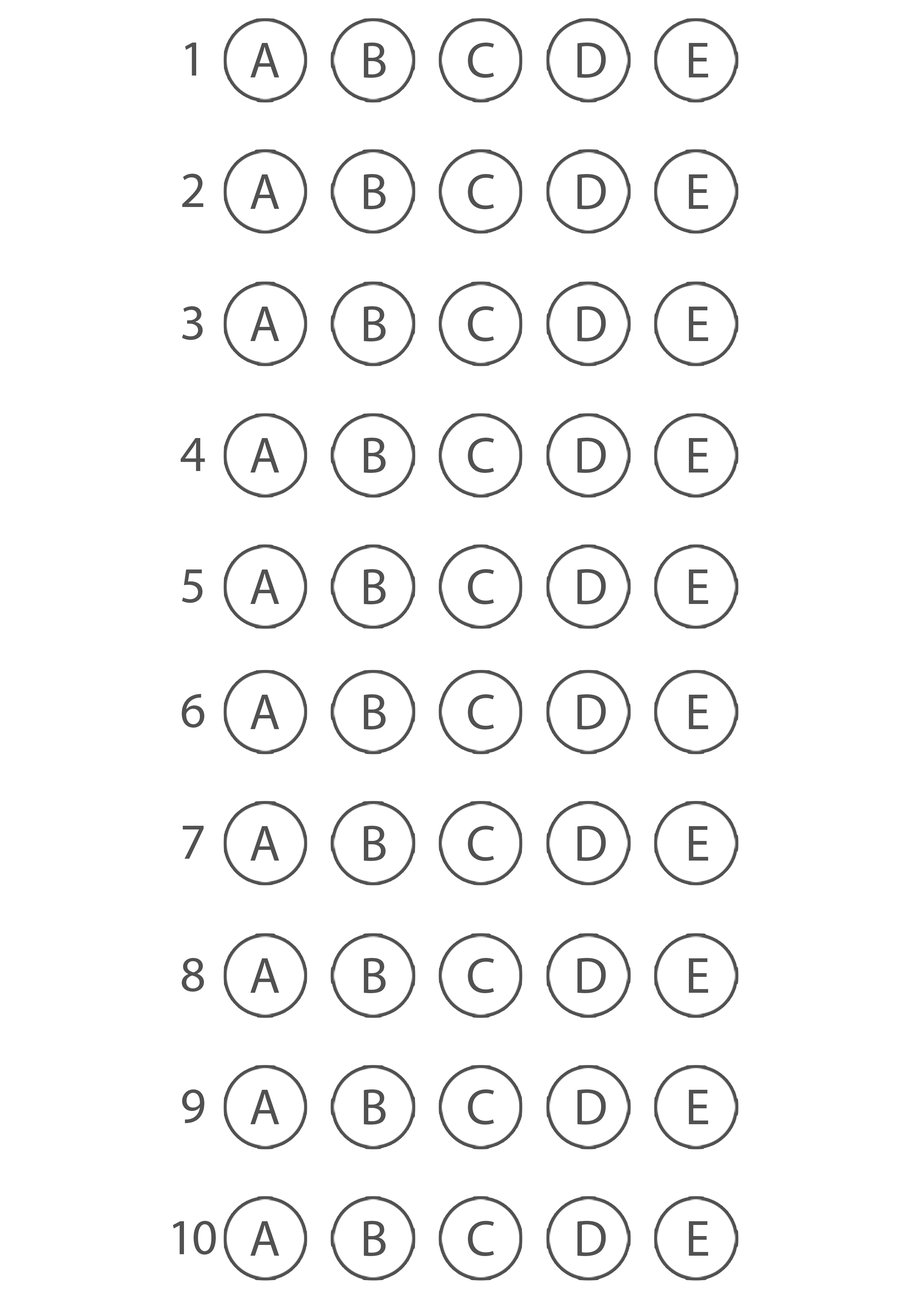
<style>
.page{position:relative;width:918px;height:1299px;background:#ffffff}
.page>*{position:absolute;margin:0}
.t1{font:50.8px "MyriadPro-Regular";letter-spacing:-0.04em;color:#515151}
</style>
<div class="page">
<p class="t1" style="left:185px;top:43px;width:11px;height:33px">1</p>
<p class="t1" style="left:250px;top:43px;width:29px;height:34px">A</p>
<p class="t1" style="left:364px;top:43px;width:22px;height:35px">B</p>
<p class="t1" style="left:468px;top:43px;width:26px;height:35px">C</p>
<p class="t1" style="left:578px;top:43px;width:28px;height:35px">D</p>
<p class="t1" style="left:689px;top:43px;width:20px;height:34px">E</p>
<p class="t1" style="left:182px;top:174px;width:22px;height:33px">2</p>
<p class="t1" style="left:250px;top:174px;width:29px;height:35px">A</p>
<p class="t1" style="left:364px;top:174px;width:22px;height:35px">B</p>
<p class="t1" style="left:468px;top:174px;width:26px;height:35px">C</p>
<p class="t1" style="left:578px;top:174px;width:28px;height:35px">D</p>
<p class="t1" style="left:689px;top:174px;width:20px;height:35px">E</p>
<p class="t1" style="left:182px;top:306px;width:21px;height:34px">3</p>
<p class="t1" style="left:250px;top:307px;width:29px;height:34px">A</p>
<p class="t1" style="left:364px;top:306px;width:22px;height:35px">B</p>
<p class="t1" style="left:468px;top:306px;width:26px;height:35px">C</p>
<p class="t1" style="left:578px;top:306px;width:28px;height:35px">D</p>
<p class="t1" style="left:689px;top:307px;width:20px;height:34px">E</p>
<p class="t1" style="left:181px;top:438px;width:24px;height:33px">4</p>
<p class="t1" style="left:250px;top:438px;width:29px;height:34px">A</p>
<p class="t1" style="left:364px;top:438px;width:22px;height:35px">B</p>
<p class="t1" style="left:468px;top:438px;width:26px;height:35px">C</p>
<p class="t1" style="left:578px;top:438px;width:28px;height:35px">D</p>
<p class="t1" style="left:689px;top:438px;width:20px;height:34px">E</p>
<p class="t1" style="left:182px;top:569px;width:21px;height:34px">5</p>
<p class="t1" style="left:250px;top:569px;width:29px;height:35px">A</p>
<p class="t1" style="left:364px;top:569px;width:22px;height:35px">B</p>
<p class="t1" style="left:468px;top:569px;width:26px;height:35px">C</p>
<p class="t1" style="left:578px;top:569px;width:28px;height:35px">D</p>
<p class="t1" style="left:689px;top:569px;width:20px;height:35px">E</p>
<p class="t1" style="left:182px;top:694px;width:22px;height:33px">6</p>
<p class="t1" style="left:250px;top:695px;width:29px;height:34px">A</p>
<p class="t1" style="left:364px;top:694px;width:22px;height:35px">B</p>
<p class="t1" style="left:468px;top:694px;width:26px;height:35px">C</p>
<p class="t1" style="left:578px;top:694px;width:28px;height:35px">D</p>
<p class="t1" style="left:689px;top:695px;width:20px;height:34px">E</p>
<p class="t1" style="left:183px;top:826px;width:21px;height:33px">7</p>
<p class="t1" style="left:250px;top:826px;width:29px;height:34px">A</p>
<p class="t1" style="left:364px;top:826px;width:22px;height:35px">B</p>
<p class="t1" style="left:468px;top:826px;width:26px;height:35px">C</p>
<p class="t1" style="left:578px;top:826px;width:28px;height:35px">D</p>
<p class="t1" style="left:689px;top:826px;width:20px;height:34px">E</p>
<p class="t1" style="left:182px;top:957px;width:22px;height:34px">8</p>
<p class="t1" style="left:250px;top:958px;width:29px;height:35px">A</p>
<p class="t1" style="left:364px;top:958px;width:22px;height:35px">B</p>
<p class="t1" style="left:468px;top:958px;width:26px;height:35px">C</p>
<p class="t1" style="left:578px;top:958px;width:28px;height:35px">D</p>
<p class="t1" style="left:689px;top:958px;width:20px;height:35px">E</p>
<p class="t1" style="left:182px;top:1089px;width:22px;height:34px">9</p>
<p class="t1" style="left:250px;top:1090px;width:29px;height:34px">A</p>
<p class="t1" style="left:364px;top:1089px;width:22px;height:35px">B</p>
<p class="t1" style="left:468px;top:1089px;width:26px;height:35px">C</p>
<p class="t1" style="left:578px;top:1089px;width:28px;height:35px">D</p>
<p class="t1" style="left:689px;top:1090px;width:20px;height:34px">E</p>
<p class="t1" style="left:173px;top:1221px;width:43px;height:33px">10</p>
<p class="t1" style="left:250px;top:1221px;width:29px;height:34px">A</p>
<p class="t1" style="left:364px;top:1221px;width:22px;height:35px">B</p>
<p class="t1" style="left:468px;top:1221px;width:26px;height:35px">C</p>
<p class="t1" style="left:578px;top:1221px;width:28px;height:35px">D</p>
<p class="t1" style="left:689px;top:1221px;width:20px;height:34px">E</p>
</div>
